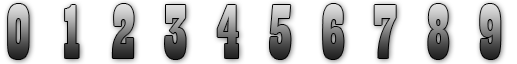
<style>
.page{position:relative;width:517px;height:64px;background:#ffffff}
.page>*{position:absolute;margin:0}
.t1{font:80px "Playbill"}
</style>
<div class="page">
<p class="t1" style="left:8px;top:4px;width:493px;height:55px">0 1 2 3 4 5 6 7 8 9</p>
</div>
